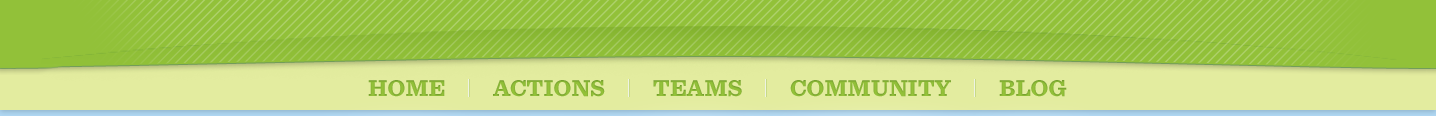
<style>
.page{position:relative;width:1436px;height:116px;background:#e3ec9f}
.page>*{position:absolute;margin:0}
.t1{font:24px "Sentinel-Bold";color:#93c139;text-transform:uppercase}
</style>
<div class="page">
<p class="t1" style="left:368px;top:80px;width:77px;height:17px">Home</p>
<p class="t1" style="left:493px;top:80px;width:112px;height:17px">actionS</p>
<p class="t1" style="left:653px;top:80px;width:89px;height:17px">Teams</p>
<p class="t1" style="left:790px;top:80px;width:161px;height:17px">Community</p>
<p class="t1" style="left:999px;top:80px;width:68px;height:17px">Blog</p>
</div>
